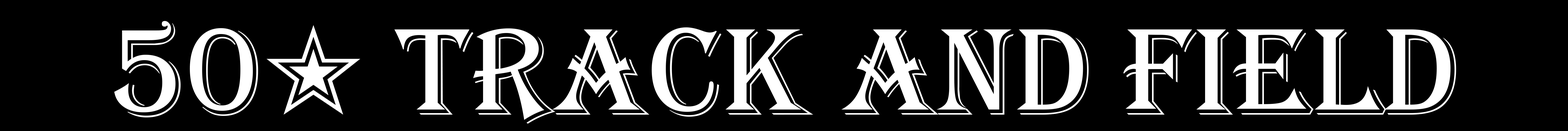
<style>
.page{position:relative;width:1568px;height:131px;background:#000000}
.page>*{position:absolute;margin:0}
.t1{font:127.6px "Algerian";color:#ffffff}
.t2{font:127.6px "SegoeUISymbol";color:#ffffff}
</style>
<div class="page">
<p class="t1" style="left:114px;top:21px;width:1342px;height:103px">50<span class="t2">✭</span> Track And Field</p>
</div>
